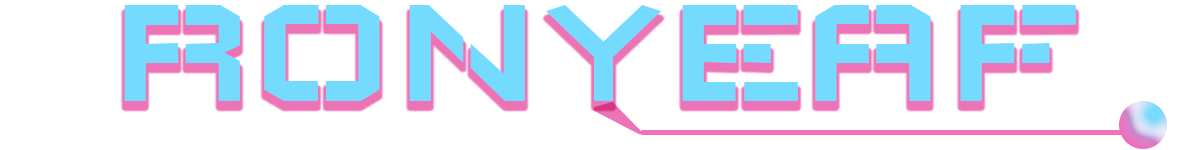
<style>
.page{position:relative;width:1200px;height:150px;background:#ffffff}
.page>*{position:absolute;margin:0}
.t1{font:166.7px "Wallpoet";color:#74dbff}
</style>
<div class="page">
<p class="t1" style="left:124px;top:5px;width:952px;height:96px">RONYEAF</p>
</div>
